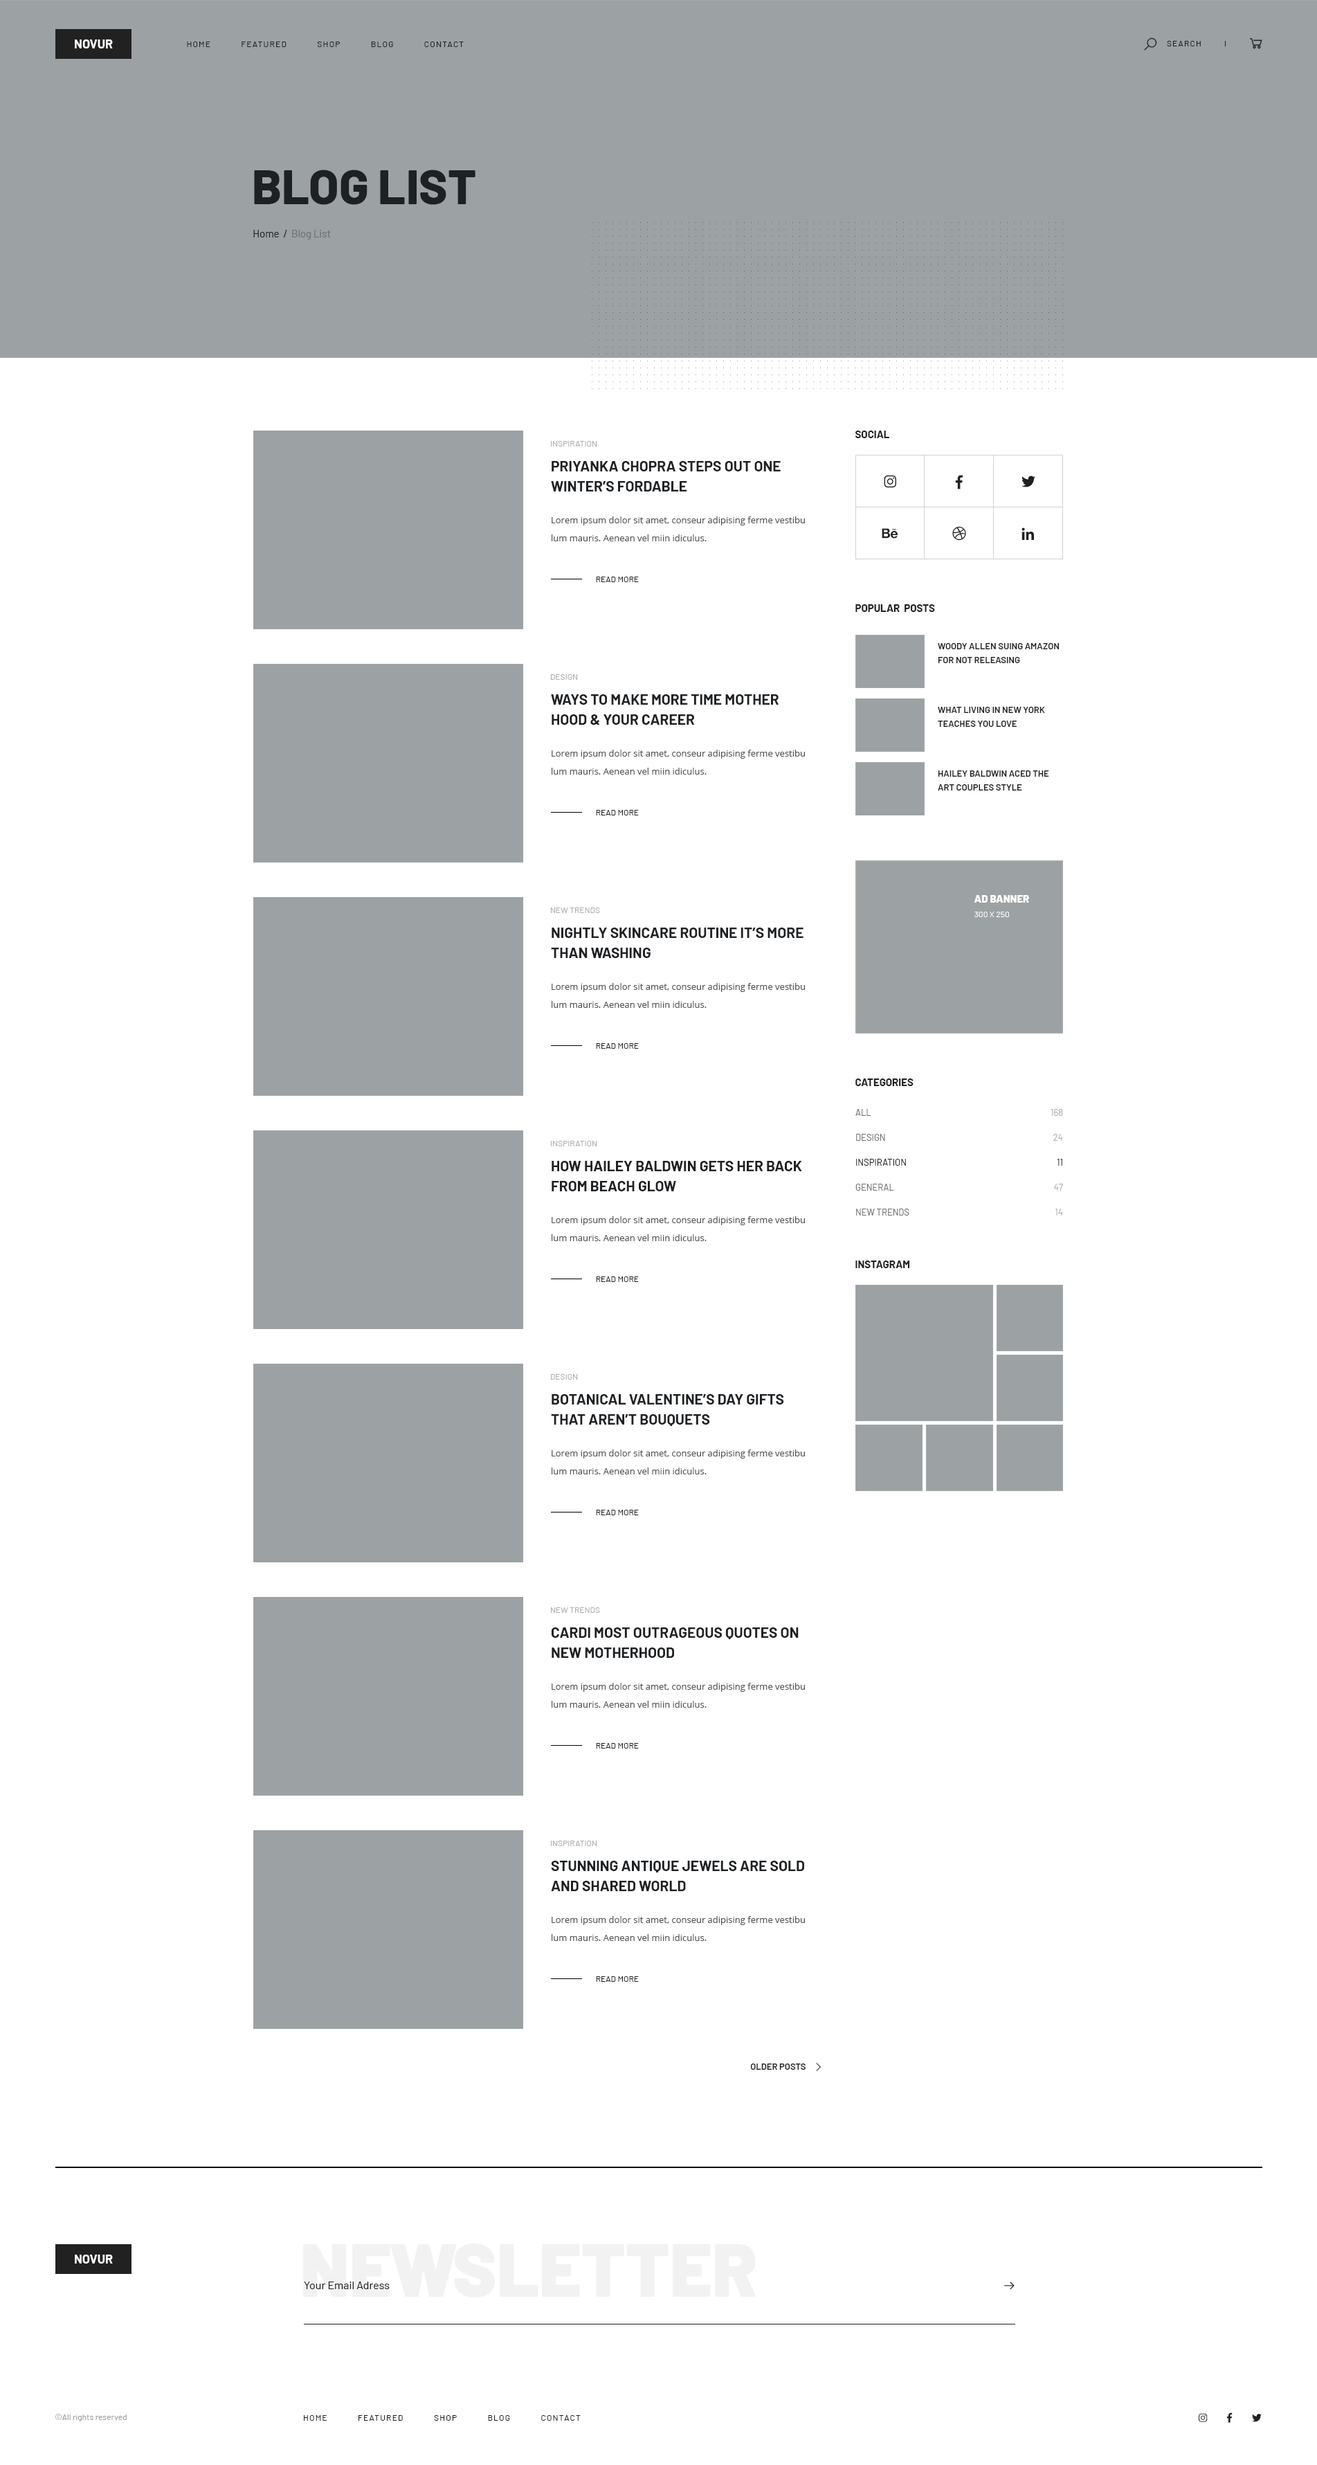
<style>
.page{position:relative;width:1317px;height:2465px;background:#ffffff}
.page>*{position:absolute;margin:0}
.t1{font:12.5px "Barlow-Bold";color:#fefefe;text-transform:uppercase}
.t2{font:8.3px "Barlow-Regular";letter-spacing:0.1em;color:#1e2124;text-transform:uppercase}
.t3{font:48.5px "Barlow-ExtraBold";color:#1e2124;text-transform:uppercase}
.t4{font:10.4px "Barlow-Regular";color:#6e7071}
.t5{font:10.4px "Barlow-Regular";color:#1e2124}
.t6{font:10.4px "Barlow-Bold";color:#1e2124;text-transform:uppercase}
.t7{font:8.3px "Barlow-Regular";color:#aeaeae;text-transform:uppercase}
.t8{font:14.5px/20.1px "Barlow-Bold";color:#1e2124;text-transform:uppercase}
.t9{font:9px/18px "OpenSans";color:#535455}
.t10{font:8.3px "Barlow-Regular";color:#1e2124;text-transform:uppercase}
.t11{font:9px/13.8px "Barlow-SemiBold";color:#1e2124;text-transform:uppercase}
.t12{font:10.4px "Barlow-Black";color:#ffffff;text-transform:uppercase}
.t13{font:8.3px "Barlow-Regular";color:#ffffff;text-transform:uppercase}
.t14{font:9px/24.9px "Barlow-Regular";color:#6e7071;text-transform:uppercase}
.t15{font:9px/24.9px "Barlow-Regular";color:#1e2124;text-transform:uppercase}
.t16{font:9px/24.9px "Barlow-Regular";color:#aaabab}
.t17{font:9px/24.9px "Barlow-Regular";color:#1e2124}
.t18{font:9px "Barlow-SemiBold";color:#1e2124;text-transform:uppercase}
.t19{font:74.1px "Barlow-Black";color:#f2f2f2}
.t20{font:11.1px "Barlow-Regular";color:#1e2124}
.t21{font:8.3px "Barlow-Regular";color:#9e9d9d}
</style>
<div class="page">
<p class="t1" style="left:75px;top:39px;width:38px;height:9px">novur</p>
<p class="t2" style="left:187px;top:42px;width:277px;height:5px">Home            Featured            Shop            Blog            Contact</p>
<p class="t2" style="left:1167px;top:41px;width:34px;height:5px">Search</p>
<p class="t3" style="left:254px;top:170px;width:222px;height:35px">Blog List</p>
<p class="t4" style="left:253px;top:230px;width:78px;height:10px"><span class="t5">Home  /</span>  Blog List</p>
<p class="t6" style="left:856px;top:431px;width:34px;height:7px">Social</p>
<p class="t7" style="left:551px;top:441px;width:46px;height:6px">Inspiration</p>
<p class="t8" style="left:551px;top:461px;width:230px;height:31px">Priyanka Chopra Steps out One  <br>Winter’s fordable</p>
<p class="t9" style="left:552px;top:516px;width:253px;height:25px">Lorem ipsum dolor sit amet, conseur adipising ferme vestibu lum mauris. Aenean vel miin idiculus.</p>
<p class="t10" style="left:596px;top:577px;width:43px;height:5px">Read More</p>
<p class="t6" style="left:856px;top:604px;width:79px;height:8px">Popular  Posts</p>
<p class="t11" style="left:938px;top:643px;width:122px;height:20px">Woody Allen Suing Amazon for Not Releasing</p>
<p class="t7" style="left:551px;top:674px;width:27px;height:6px">Design</p>
<p class="t8" style="left:551px;top:694px;width:228px;height:31px">Ways To Make More Time Mother <br>hood &amp; Your Career</p>
<p class="t11" style="left:938px;top:707px;width:107px;height:20px">What Living in New York Teaches You Love</p>
<p class="t9" style="left:552px;top:750px;width:253px;height:25px">Lorem ipsum dolor sit amet, conseur adipising ferme vestibu lum mauris. Aenean vel miin idiculus.</p>
<p class="t11" style="left:938px;top:771px;width:112px;height:20px">Hailey Baldwin Aced the Art Couples Style</p>
<p class="t10" style="left:596px;top:810px;width:43px;height:6px">Read More</p>
<p class="t12" style="left:974px;top:895px;width:55px;height:8px">Ad Banner</p>
<p class="t7" style="left:551px;top:908px;width:49px;height:5px">New Trends</p>
<p class="t13" style="left:975px;top:912px;width:34px;height:5px">300 X 250</p>
<p class="t8" style="left:551px;top:928px;width:253px;height:30px">Nightly Skincare Routine It’s More Than Washing</p>
<p class="t9" style="left:552px;top:983px;width:253px;height:25px">Lorem ipsum dolor sit amet, conseur adipising ferme vestibu lum mauris. Aenean vel miin idiculus.</p>
<p class="t10" style="left:596px;top:1043px;width:43px;height:6px">Read More</p>
<p class="t6" style="left:856px;top:1079px;width:58px;height:7px">Categories</p>
<p class="t14" style="left:856px;top:1109px;width:54px;height:107px">All <br>Design<br><span class="t15">Inspiration<br></span>General<br>New Trends</p>
<p class="t16" style="left:1051px;top:1109px;width:12px;height:107px;text-align:right">168<br>24<br><span class="t17">11<br></span>47<br>14</p>
<p class="t7" style="left:551px;top:1141px;width:46px;height:5px">Inspiration</p>
<p class="t8" style="left:552px;top:1161px;width:250px;height:30px">How Hailey Baldwin Gets Her Back From Beach Glow</p>
<p class="t9" style="left:552px;top:1216px;width:253px;height:25px">Lorem ipsum dolor sit amet, conseur adipising ferme vestibu lum mauris. Aenean vel miin idiculus.</p>
<p class="t6" style="left:856px;top:1261px;width:54px;height:7px">Instagram</p>
<p class="t10" style="left:596px;top:1277px;width:43px;height:5px">Read More</p>
<p class="t7" style="left:551px;top:1374px;width:27px;height:6px">Design</p>
<p class="t8" style="left:551px;top:1394px;width:233px;height:32px">Botanical Valentine’s Day Gifts That Aren’t Bouquets</p>
<p class="t9" style="left:552px;top:1450px;width:253px;height:25px">Lorem ipsum dolor sit amet, conseur adipising ferme vestibu lum mauris. Aenean vel miin idiculus.</p>
<p class="t10" style="left:596px;top:1510px;width:43px;height:5px">Read More</p>
<p class="t7" style="left:551px;top:1608px;width:49px;height:5px">New Trends</p>
<p class="t8" style="left:552px;top:1628px;width:247px;height:30px">Cardi Most Outrageous Quotes on New Motherhood</p>
<p class="t9" style="left:552px;top:1683px;width:253px;height:25px">Lorem ipsum dolor sit amet, conseur adipising ferme vestibu lum mauris. Aenean vel miin idiculus.</p>
<p class="t10" style="left:596px;top:1743px;width:43px;height:6px">Read More</p>
<p class="t7" style="left:551px;top:1841px;width:46px;height:5px">Inspiration</p>
<p class="t8" style="left:551px;top:1861px;width:253px;height:30px">Stunning Antique Jewels Are Sold and Shared World</p>
<p class="t9" style="left:552px;top:1916px;width:253px;height:25px">Lorem ipsum dolor sit amet, conseur adipising ferme vestibu lum mauris. Aenean vel miin idiculus.</p>
<p class="t10" style="left:596px;top:1977px;width:43px;height:5px">Read More</p>
<p class="t18" style="left:750px;top:2064px;width:56px;height:6px">Older Posts</p>
<p class="t19" style="left:303px;top:2244px;width:453px;height:54px">NEWSLETTER</p>
<p class="t1" style="left:75px;top:2255px;width:38px;height:9px">Novur</p>
<p class="t20" style="left:304px;top:2282px;width:86px;height:7px">Your Email Adress</p>
<p class="t21" style="left:55px;top:2414px;width:72px;height:8px">©All rights reserved</p>
<p class="t2" style="left:304px;top:2415px;width:277px;height:6px">Home            Featured            Shop            Blog            Contact</p>
</div>
